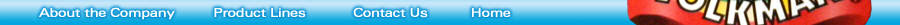
<style>
.page{position:relative;width:900px;height:25px}
.page>*{position:absolute;margin:0}
.t1{font:12px "ZurichBT-RomanExtended";letter-spacing:-0.025em;color:#ffffff;font-weight:bold}
</style>
<div class="page">
<p class="t1" style="left:39px;top:7px;width:472px;height:13px">About the Company         Product Lines           Contact Us          Home</p>
</div>
